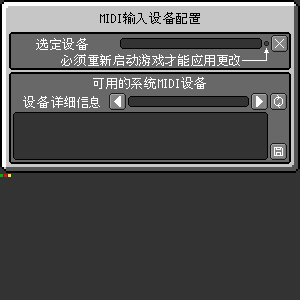
<style>
.page{position:relative;width:300px;height:300px;background:#333333}
.page>*{position:absolute;margin:0}
.t1{font:11.7px "mplus_hzk_12";color:#000000}
.t2{font:11.7px "mplus_hzk_12";color:#ffffff}
</style>
<div class="page">
<p class="t1" style="left:100px;top:12px;width:100px;height:12px">MIDI输入设备配置</p>
<p class="t2" style="left:36px;top:38px;width:52px;height:12px">选定设备</p>
<p class="t2" style="left:61px;top:54px;width:179px;height:12px">必须重新启动游戏才能应用更改</p>
<p class="t2" style="left:61px;top:54px;width:179px;height:12px">必须重新启动游戏才能应用更改</p>
<p class="t2" style="left:93px;top:77px;width:113px;height:12px">可用的系统MIDI设备</p>
<p class="t2" style="left:23px;top:96px;width:77px;height:12px">设备详细信息</p>
</div>
